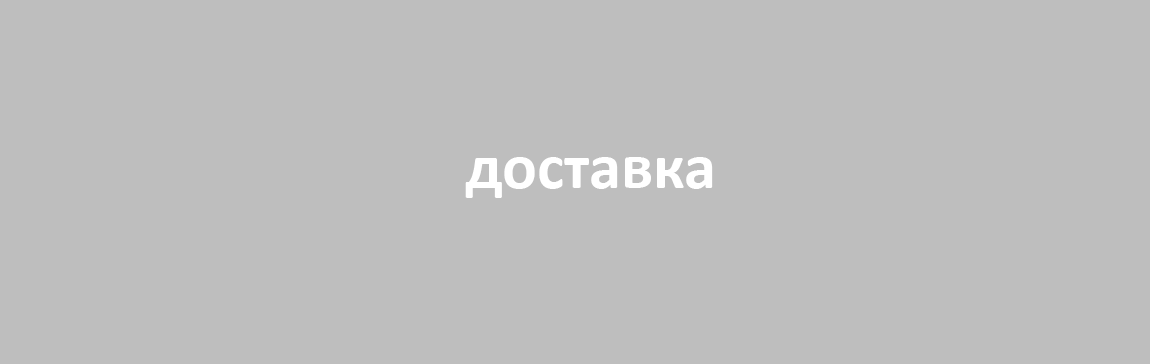
<style>
.page{position:relative;width:1150px;height:364px;background:#bebebe}
.page>*{position:absolute;margin:0}
.t1{font:64.6px "Calibri-Bold";color:#ffffff}
</style>
<div class="page">
<p class="t1" style="left:465px;top:157px;width:248px;height:41px">доставка</p>
</div>
